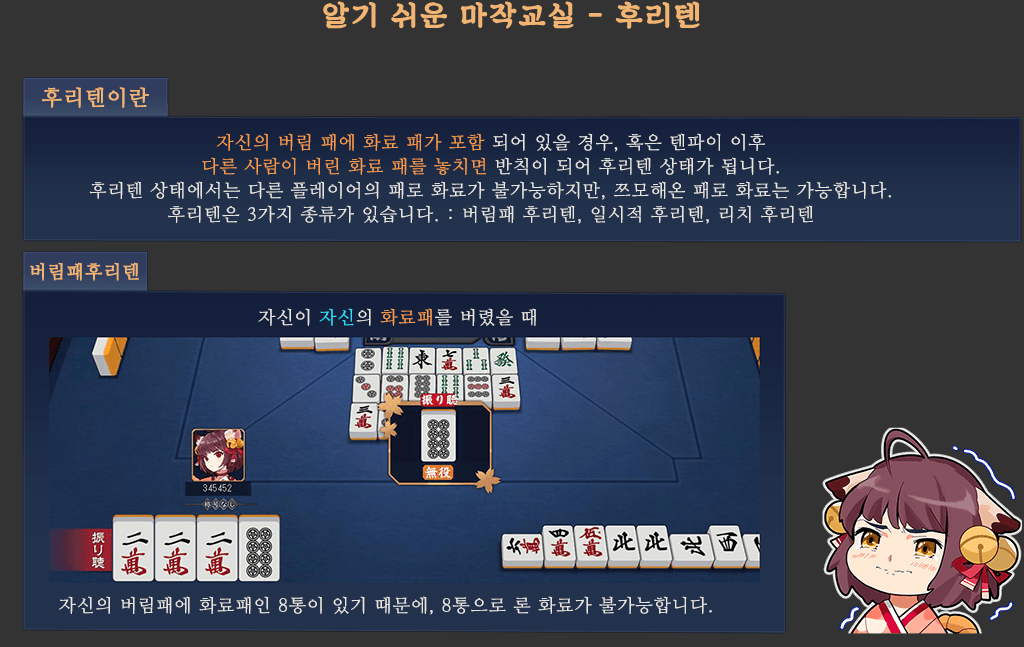
<style>
.page{position:relative;width:1024px;height:647px;background:#333333}
.page>*{position:absolute;margin:0}
.t1{font:29px "SDKukdetopokki-aLt";letter-spacing:0.06em;color:#f1b472;font-weight:bold}
.t2{font:21px "NanumMyeongjo";letter-spacing:0.06em;color:#f1b472;font-weight:bold}
.t3{font:18px/24px "NanumMyeongjo";letter-spacing:0.06em;color:#e7e5e1}
.t4{font:18px/24px "NanumMyeongjo";letter-spacing:0.06em;color:#f69a4a}
.t5{font:18px "NanumMyeongjo";letter-spacing:0.06em;color:#f1b472;font-weight:bold}
.t6{font:18px "NanumMyeongjo";letter-spacing:0.06em;color:#e7e5e1}
.t7{font:18px "NanumMyeongjo";letter-spacing:0.06em;color:#2edefc}
.t8{font:18px "NanumMyeongjo";letter-spacing:0.06em;color:#f69a4a}
</style>
<div class="page">
<p class="t1" style="left:323px;top:1px;width:377px;height:28px">알기 쉬운 마작교실 - 후리텐</p>
<p class="t2" style="left:42px;top:87px;width:107px;height:21px">후리텐이란</p>
<p class="t3" style="left:89px;top:133px;width:802px;height:91px;text-align:center"><span class="t4">자신의 버림 패에 화료 패가 포함 </span>되어 있을 경우, 혹은 텐파이 이후<br><span class="t4">다른 사람이 버린 화료 패를 놓치면</span> 반칙이 되어 후리텐 상태가 됩니다.<br>후리텐 상태에서는 다른 플레이어의 패로 화료가 불가능하지만, 쯔모해온 패로 화료는 가능합니다.<br>후리텐은 3가지 종류가 있습니다. : 버림패 후리텐, 일시적 후리텐, 리치 후리텐</p>
<p class="t5" style="left:30px;top:262px;width:109px;height:19px">버림패후리텐</p>
<p class="t6" style="left:258px;top:308px;width:278px;height:18px">자신이 <span class="t7">자신</span>의 <span class="t8">화료패</span>를 버렸을 때</p>
<p class="t6" style="left:59px;top:596px;width:653px;height:19px">자신의 버림패에 화료패인 8통이 있기 때문에, 8통으로 론 화료가 불가능합니다.</p>
</div>
